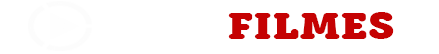
<style>
.page{position:relative;width:439px;height:54px;background:#ffffff}
.page>*{position:absolute;margin:0}
.t1{font:35px "eacologica-round_slab";color:#c60203;scale:1.25 1}
</style>
<div class="page">
<p class="t1" style="left:228px;top:12px;width:166px;height:27px">FILMES</p>
</div>
